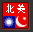
<style>
.page{position:relative;width:33px;height:32px;background:#f20000}
.page>*{position:absolute;margin:0}
.t1{font:10.4px "SimSun";color:#ffffff}
</style>
<div class="page">
<p class="t1" style="left:6px;top:4px;width:19px;height:9px">北美</p>
</div>
